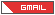
<style>
.page{position:relative;width:55px;height:15px;background:#e23333}
.page>*{position:absolute;margin:0}
.t1{font:8px "BitDustTwo";color:#ffffff}
</style>
<div class="page">
<p class="t1" style="left:21px;top:5px;width:25px;height:5px">GMAIL</p>
</div>
